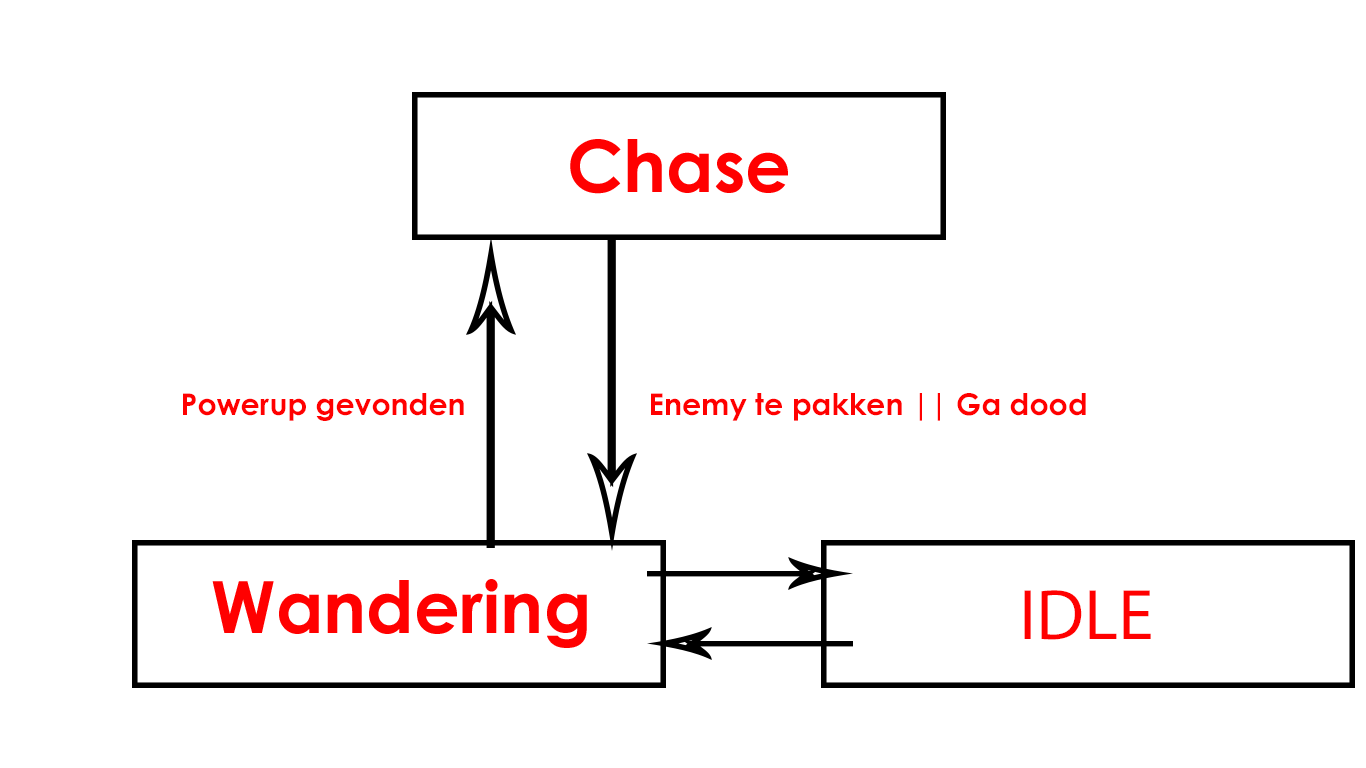
<style>
.page{position:relative;width:1366px;height:768px;background:#ffffff}
.page>*{position:absolute;margin:0}
.t1{font:30px "CenturyGothic-Bold";color:#ff0000}
.t2{font:72px "MyriadPro-Regular";color:#ff0000}
</style>
<div class="page">
<p class="t1" style="left:183px;top:393px;width:281px;height:28px">Powerup gevonden</p>
<p class="t1" style="left:651px;top:393px;width:435px;height:28px">Enemy te pakken || Ga dood</p>
<p class="t2" style="left:1024px;top:590px;width:127px;height:50px">IDLE</p>
</div>
